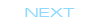
<style>
.page{position:relative;width:100px;height:25px;background:#ffffff}
.page>*{position:absolute;margin:0}
.t1{font:14px "MicrogrammaD-MediExte";letter-spacing:0.075em;color:#8dd9ff}
</style>
<div class="page">
<p class="t1" style="left:25px;top:8px;width:50px;height:9px">NEXT</p>
</div>
